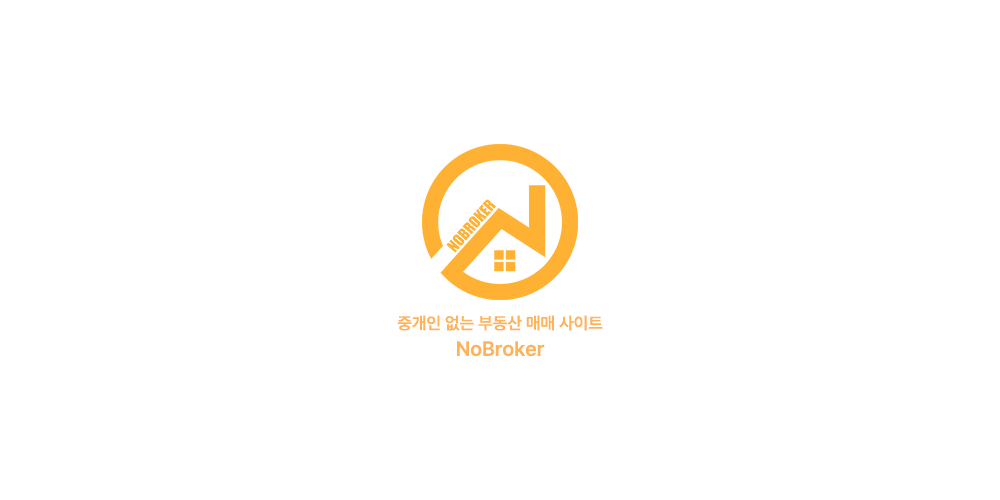
<style>
.page{position:relative;width:1000px;height:500px;background:#ffffff}
.page>*{position:absolute;margin:0}
.t1{font:16.9px/23.6px "Pretendard-SemiBold";color:#ffb358}
.t2{font:20.2px/23.6px "Pretendard-SemiBold";color:#ffb358}
</style>
<div class="page">
<p class="t1" style="left:397px;top:315px;width:206px;height:42px;text-align:center">중개인 없는 부동산 매매 사이트<br><span class="t2">NoBroker</span></p>
</div>
